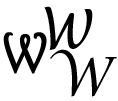
<style>
.page{position:relative;width:118px;height:101px;background:#ffffff}
.page>*{position:absolute;margin:0}
.t1{font:54.1px "LucidaHandwriting-Italic";color:#000000}
.t2{font:54.1px "Harrington";color:#000000;font-weight:bold}
.t3{font:54.1px "LucidaCalligraphy-Italic";color:#000000}
</style>
<div class="page">
<p class="t1" style="left:44px;top:6px;width:49px;height:44px">W</p>
<p class="t2" style="left:3px;top:32px;width:44px;height:42px">W</p>
<p class="t3" style="left:50px;top:49px;width:67px;height:48px">W</p>
</div>
